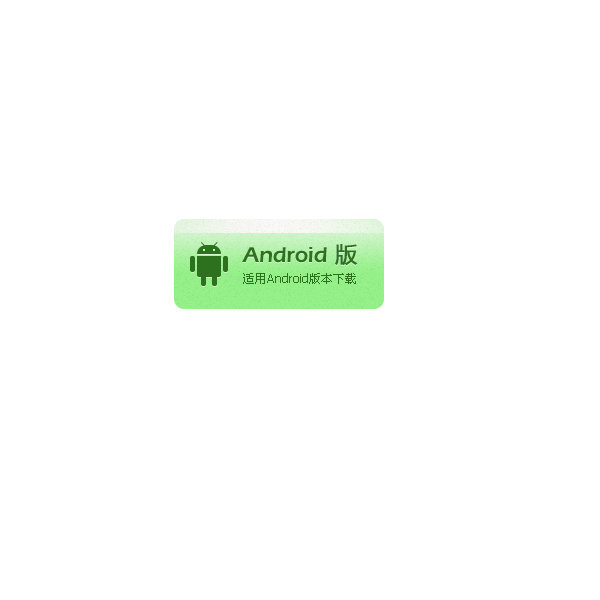
<style>
.page{position:relative;width:600px;height:600px;background:#ffffff}
.page>*{position:absolute;margin:0}
.t1{font:22px "ErasITC-Demi";letter-spacing:-0.01em;color:#2d701e}
.t2{font:22px "MicrosoftYaHei";color:#2d701e;font-weight:bold}
.t3{font:12px "Tahoma";color:#2d701e}
.t4{font:12px "SimSun";color:#2d701e}
</style>
<div class="page">
<p class="t1" style="left:242px;top:244px;width:116px;height:21px">Android <span class="t2">版</span></p>
<p class="t3" style="left:243px;top:273px;width:113px;height:11px"><span class="t4">适用</span>Android<span class="t4">版本下载</span></p>
</div>
